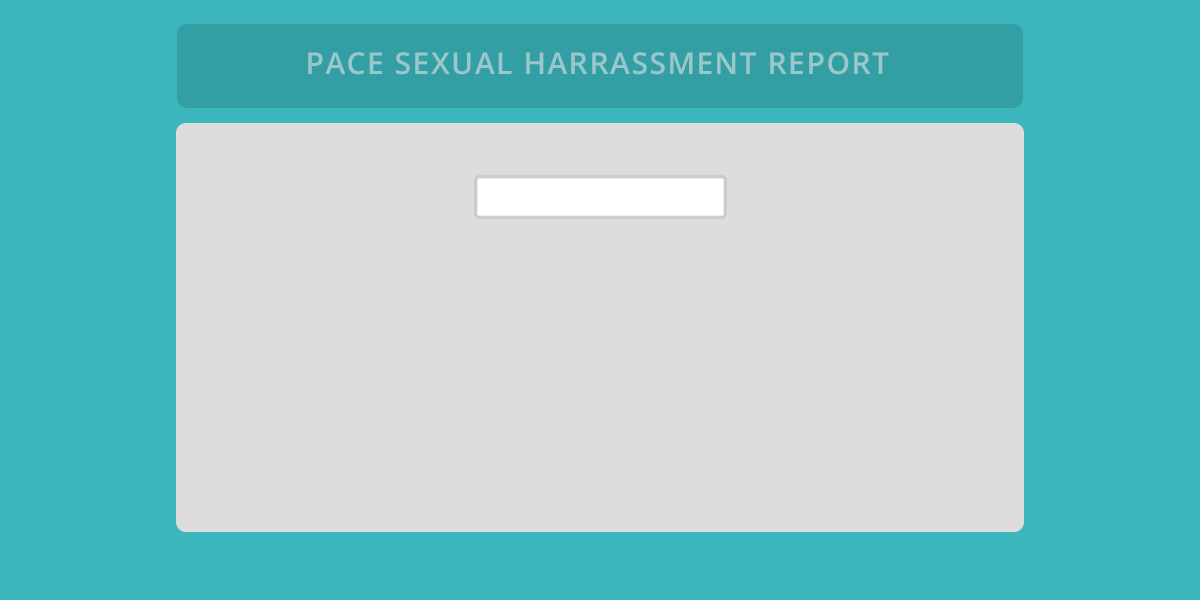
<style>
.page{position:relative;width:1200px;height:600px;background:#dddddd}
.page>*{position:absolute;margin:0}
.t1{font:30px "OpenSans-Semibold";letter-spacing:0.05em;color:#99c8cb;text-transform:uppercase}
</style>
<div class="page">
<p class="t1" style="left:308px;top:52px;width:581px;height:23px">PACE SEXUAL HARRASSMENT REPORT</p>
</div>
